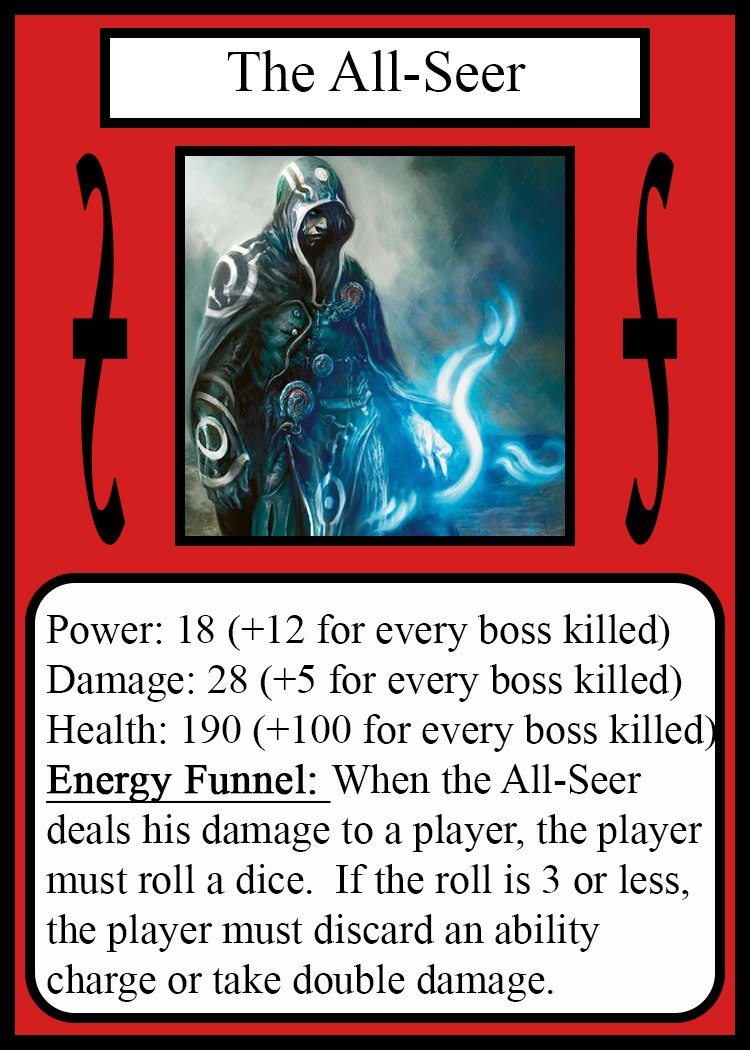
<style>
.page{position:relative;width:750px;height:1050px;background:#fffcfc}
.page>*{position:absolute;margin:0}
.t1{font:58.3px "TimesNewRomanPSMT";color:#010101}
.t2{font:814.3px "Apple-Chancery";color:#000000;font-weight:bold;scale:0.17 1}
.t3{font:814.6px "Apple-Chancery";color:#000000;font-weight:bold;scale:0.17 1}
.t4{font:41.7px "TimesNewRomanPSMT";color:#000000}
.t5{font:41.7px "TimesNewRomanPSMT";color:#000000;font-weight:bold;text-decoration:underline}
</style>
<div class="page">
<p class="t1" style="left:227px;top:50px;width:299px;height:42px">The All-Seer</p>
<p class="t2" style="left:72px;top:153px;width:56px;height:392px;rotate:180deg">s</p>
<p class="t3" style="left:622px;top:152px;width:55px;height:393px">s</p>
<p class="t4" style="left:46px;top:614px;width:671px;height:388px">Power: 18 (+12 for every boss killed)<br>Damage: 28 (+5 for every boss killed)<br>Health: 190 (+100 for every boss killed)<br><span class="t5">Energy Funnel: </span>When the All-Seer<br>deals his damage to a player, the player<br>must roll a dice.  If the roll is 3 or less,<br>the player must discard an ability<br>charge or take double damage.</p>
</div>
